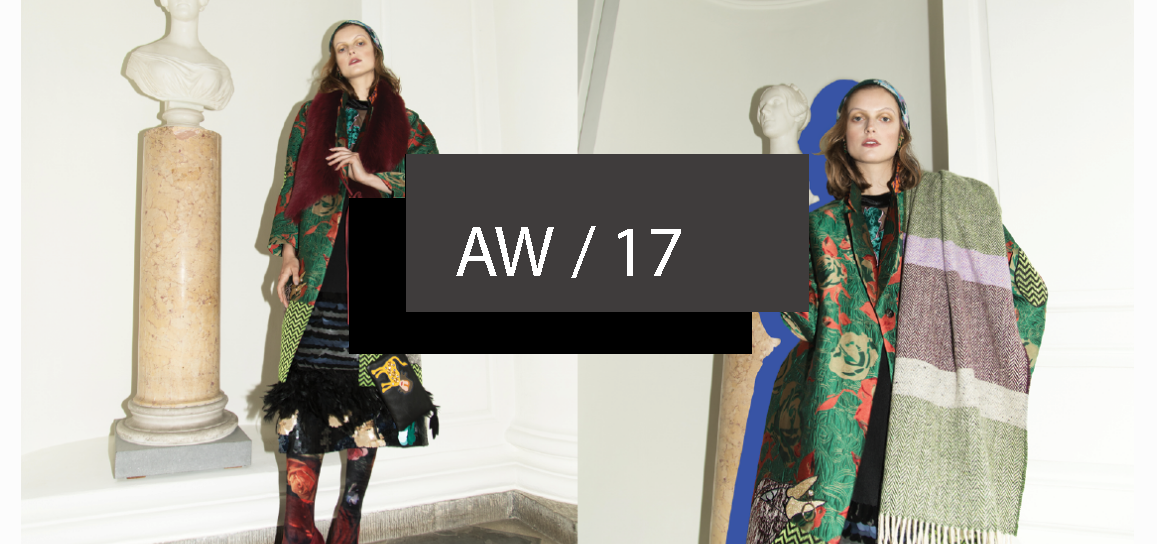
<style>
.page{position:relative;width:1157px;height:544px}
.page>*{position:absolute;margin:0}
.t1{font:72px "MyriadPro-Regular";color:#ffffff}
</style>
<div class="page">
<p class="t1" style="left:456px;top:226px;width:225px;height:52px">AW / 17</p>
</div>
